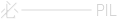
<style>
.page{position:relative;width:119px;height:19px;background:#ffffff}
.page>*{position:absolute;margin:0}
.t1{font:16px "NotoSansCJKkr-Thin";letter-spacing:-0.01em;color:#d4d4d4}
</style>
<div class="page">
<p class="t1" style="left:97px;top:4px;width:20px;height:12px">PIL</p>
</div>
